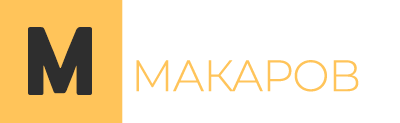
<style>
.page{position:relative;width:400px;height:123px;background:#ffffff}
.page>*{position:absolute;margin:0}
.t1{font:109.8px "PFHandbookPro-Black";letter-spacing:-0.02em;color:#2e2e2e}
.t2{font:43.9px "Montserrat-Light";letter-spacing:-0.03em;color:#ffc45a}
</style>
<div class="page">
<p class="t1" style="left:28px;top:27px;width:64px;height:68px">М</p>
<p class="t2" style="left:136px;top:60px;width:223px;height:32px">МАКАРОВ</p>
</div>
